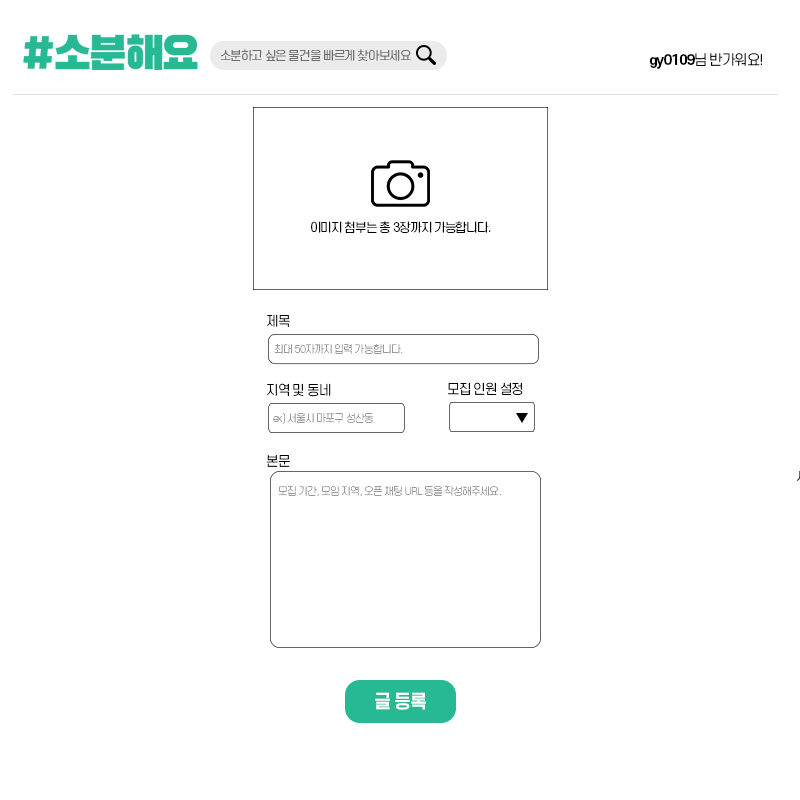
<style>
.page{position:relative;width:800px;height:800px;background:#ffffff}
.page>*{position:absolute;margin:0}
.t1{font:12px "S-CoreDream-3Light";letter-spacing:-0.075em;color:#6f6c6c}
.t2{font:14px "S-CoreDream-3Light";letter-spacing:-0.075em;color:#000000}
.t3{font:14px "S-CoreDream-6Bold";letter-spacing:-0.075em;color:#000000}
.t4{font:12.1px "S-CoreDream-3Light";letter-spacing:-0.075em;color:#000000}
.t5{font:13.2px "S-CoreDream-3Light";letter-spacing:-0.075em;color:#000000}
.t6{font:10.3px "S-CoreDream-2ExtraLight";letter-spacing:-0.075em;color:#999999}
.t7{font:18px "S-CoreDream-6Bold";letter-spacing:-0.075em;color:#ffffff}
</style>
<div class="page">
<p class="t1" style="left:220px;top:49px;width:191px;height:12px">소분하고 싶은 물건을 빠르게 찾아보세요</p>
<p class="t2" style="left:649px;top:53px;width:113px;height:16px"><span class="t3">gy0109</span>님 반가워요!</p>
<p class="t4" style="left:311px;top:221px;width:180px;height:12px">이미지 첨부는 총 3장까지 가능합니다.</p>
<p class="t5" style="left:267px;top:314px;width:23px;height:13px">제목</p>
<p class="t6" style="left:274px;top:344px;width:129px;height:10px">최대 50자까지 입력 가능합니다.</p>
<p class="t5" style="left:267px;top:383px;width:64px;height:14px">지역 및 동네</p>
<p class="t5" style="left:448px;top:382px;width:75px;height:13px">모집 인원 설정</p>
<p class="t6" style="left:273px;top:413px;width:100px;height:11px">ex) 서울시 마포구 성산동</p>
<p class="t5" style="left:266px;top:455px;width:24px;height:12px">본문</p>
<p class="t6" style="left:278px;top:486px;width:224px;height:10px">모집 기간, 모임 지역, 오픈 채팅 URL 등을 작성해주세요.</p>
<p class="t7" style="left:375px;top:692px;width:51px;height:18px">글 등록</p>
</div>
